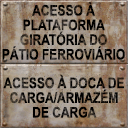
<style>
.page{position:relative;width:128px;height:128px}
.page>*{position:absolute;margin:0}
.t1{font:14.7px/14.7px "Arial-BoldMT";color:#000000;text-transform:uppercase;scale:0.82 1}
.t2{font:14.7px/14.7px "Arial-BoldMT";text-transform:uppercase;scale:0.82 1}
</style>
<div class="page">
<p class="t1" style="left:2px;top:2px;width:123px;height:58px;text-align:center">Acesso à<br>plataforma<br>giratória do<br>pátio ferroviário</p>
<p class="t2" style="left:3px;top:74px;width:121px;height:44px;text-align:center">acesso à doca de<br>carga/armazém<br>de carga</p>
</div>
